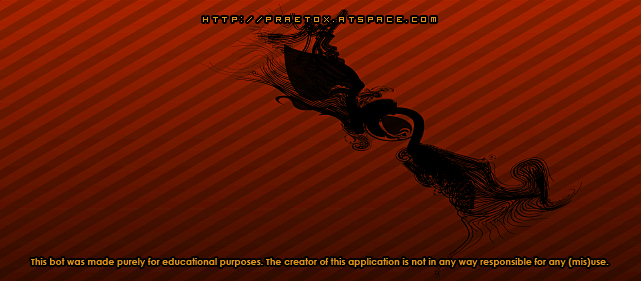
<style>
.page{position:relative;width:641px;height:281px}
.page>*{position:absolute;margin:0}
.t1{font:12px "VisitorTT2BRK";letter-spacing:0.3em;color:#e29315}
.t2{font:9.3px "CenturyGothic-Bold";color:#e29315}
</style>
<div class="page">
<p class="t1" style="left:203px;top:17px;width:233px;height:5px">http://praetox.atspace.com</p>
<p class="t2" style="left:31px;top:258px;width:578px;height:9px">This bot was made purely for educational purposes. The creator of this application is not in any way responsible for any (mis)use.</p>
</div>
